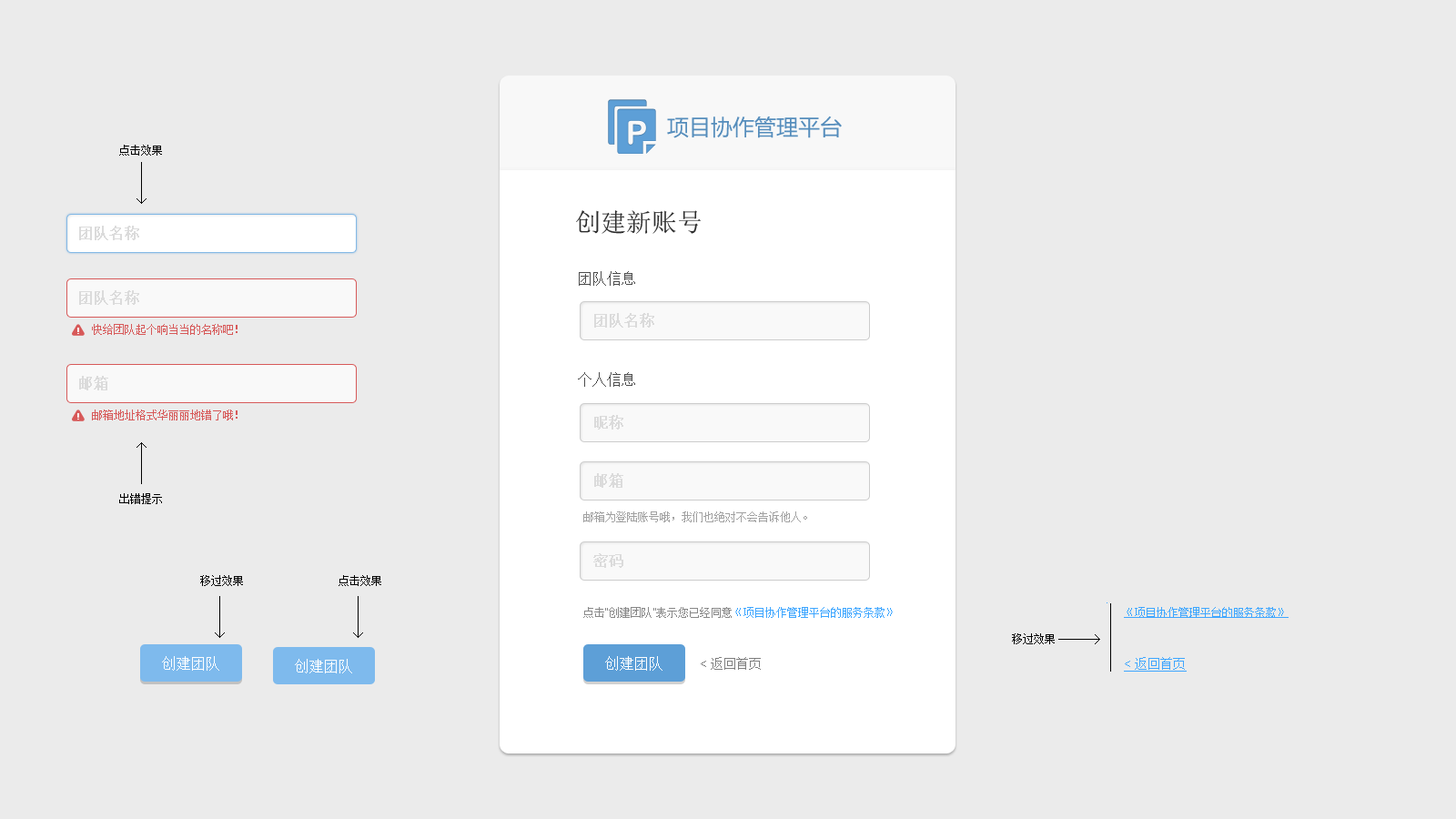
<style>
.page{position:relative;width:1456px;height:819px;background:#ebebeb}
.page>*{position:absolute;margin:0}
.t1{font:21.8px "MicrosoftYaHei";color:#548cbb}
.t2{font:10.9px "SimSun";color:#000000}
.t3{font:25.5px "SimSun";color:#2c2c2c}
.t4{font:14.6px "SimSun";color:#dbdbdb;font-weight:bold}
.t5{font:14.6px "SimSun";color:#4c4c4c}
.t6{font:9.1px "ArialMT";color:#fefefe;font-weight:bold}
.t7{font:10.9px "SimSun";color:#d75959}
.t8{font:10.9px "SimSun";color:#a1a1a1}
.t9{font:10.9px "SimSun";color:#3ea6ff}
.t10{font:10.9px "SimSun";color:#888888}
.t11{font:10.9px "ArialMT";color:#888888}
.t12{font:10.9px "SimSun";color:#3ea6ff;text-decoration:underline}
.t13{font:14.6px "SimSun";color:#ffffff}
.t14{font:12.7px "SimSun";color:#7e7e7e}
.t15{font:12.7px "ArialMT";color:#7e7e7e}
.t16{font:12.7px "SimSun";color:#3ea6ff;text-decoration:underline}
.t17{font:12.7px "ArialMT";color:#3ea6ff;text-decoration:underline}
</style>
<div class="page">
<p class="t1" style="left:667px;top:116px;width:175px;height:22px">项目协作管理平台</p>
<p class="t2" style="left:119px;top:145px;width:43px;height:11px">点击效果</p>
<p class="t3" style="left:576px;top:210px;width:125px;height:24px">创建新账号</p>
<p class="t4" style="left:79px;top:226px;width:60px;height:14px">团队名称</p>
<p class="t5" style="left:579px;top:271px;width:56px;height:15px">团队信息</p>
<p class="t4" style="left:79px;top:290px;width:60px;height:15px">团队名称</p>
<p class="t4" style="left:594px;top:313px;width:60px;height:15px">团队名称</p>
<p class="t6" style="left:77px;top:328px;width:2px;height:6px">!</p>
<p class="t7" style="left:92px;top:324px;width:146px;height:11px">快给团队起个响当当的名称吧！</p>
<p class="t4" style="left:79px;top:376px;width:29px;height:14px">邮箱</p>
<p class="t5" style="left:578px;top:372px;width:57px;height:15px">个人信息</p>
<p class="t6" style="left:77px;top:413px;width:2px;height:7px">!</p>
<p class="t7" style="left:92px;top:409px;width:146px;height:11px">邮箱地址格式华丽丽地错了哦！</p>
<p class="t4" style="left:594px;top:415px;width:29px;height:15px">昵称</p>
<p class="t4" style="left:594px;top:473px;width:29px;height:15px">邮箱</p>
<p class="t2" style="left:119px;top:493px;width:43px;height:11px">出错提示</p>
<p class="t8" style="left:583px;top:511px;width:224px;height:11px">邮箱为登陆账号哦，我们也绝对不会告诉他人。</p>
<p class="t4" style="left:593px;top:553px;width:30px;height:15px">密码</p>
<p class="t2" style="left:200px;top:575px;width:43px;height:11px">移过效果</p>
<p class="t2" style="left:339px;top:575px;width:42px;height:11px">点击效果</p>
<p class="t9" style="left:583px;top:607px;width:310px;height:11px"><span class="t10">点击</span><span class="t11">“</span><span class="t10">创建团队</span><span class="t11">”</span><span class="t10">表示您已经同意</span>《项目协作管理平台的服务条款》</p>
<p class="t12" style="left:1124px;top:607px;width:165px;height:11px">《项目协作管理平台的服务条款》</p>
<p class="t2" style="left:1012px;top:633px;width:43px;height:11px">移过效果</p>
<p class="t13" style="left:162px;top:656px;width:57px;height:15px">创建团队</p>
<p class="t13" style="left:295px;top:659px;width:57px;height:14px">创建团队</p>
<p class="t13" style="left:605px;top:656px;width:57px;height:15px">创建团队</p>
<p class="t14" style="left:701px;top:657px;width:60px;height:13px"><span class="t15">&lt; </span>返回首页</p>
<p class="t16" style="left:1124px;top:657px;width:63px;height:15px"><span class="t17">&lt; </span>返回首页</p>
</div>
